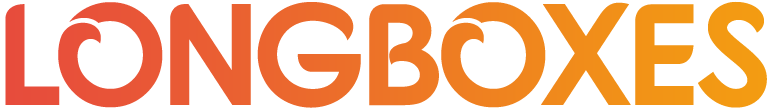
<style>
.page{position:relative;width:775px;height:110px;background:#ffffff}
.page>*{position:absolute;margin:0}
.t1{font:144px "Fonarto";letter-spacing:-0.025em}
</style>
<div class="page">
<p class="t1" style="left:5px;top:1px;width:762px;height:107px">LONGBOXES</p>
</div>
